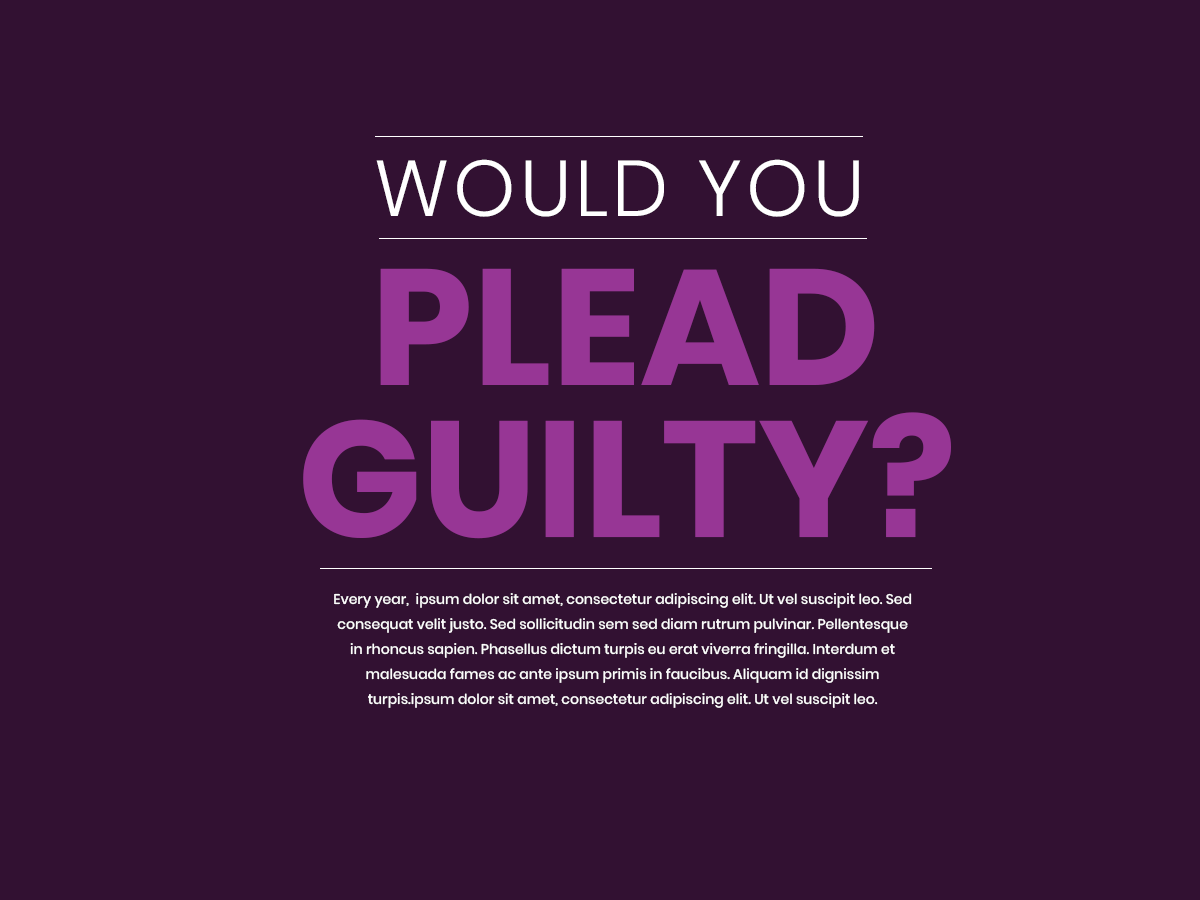
<style>
.page{position:relative;width:1200px;height:900px;background:#321132}
.page>*{position:absolute;margin:0}
.t1{font:78.9px "Poppins-Light";letter-spacing:0.05em;color:#ffffff}
.t2{font:164.3px/151.8px "Poppins-Bold";color:#973695}
.t3{font:14px/25px "Poppins-Medium";color:#fdfdfd}
</style>
<div class="page">
<p class="t1" style="left:376px;top:159px;width:483px;height:58px">WOULD YOU</p>
<p class="t2" style="left:303px;top:268px;width:648px;height:271px;text-align:center">PLEAD<br>GUILTY?</p>
<p class="t3" style="left:334px;top:593px;width:578px;height:115px;text-align:center">Every year,  ipsum dolor sit amet, consectetur adipiscing elit. Ut vel suscipit leo. Sed consequat velit justo. Sed sollicitudin sem sed diam rutrum pulvinar. Pellentesque in rhoncus sapien. Phasellus dictum turpis eu erat viverra fringilla. Interdum et malesuada fames ac ante ipsum primis in faucibus. Aliquam id dignissim turpis.ipsum dolor sit amet, consectetur adipiscing elit. Ut vel suscipit leo.</p>
</div>
